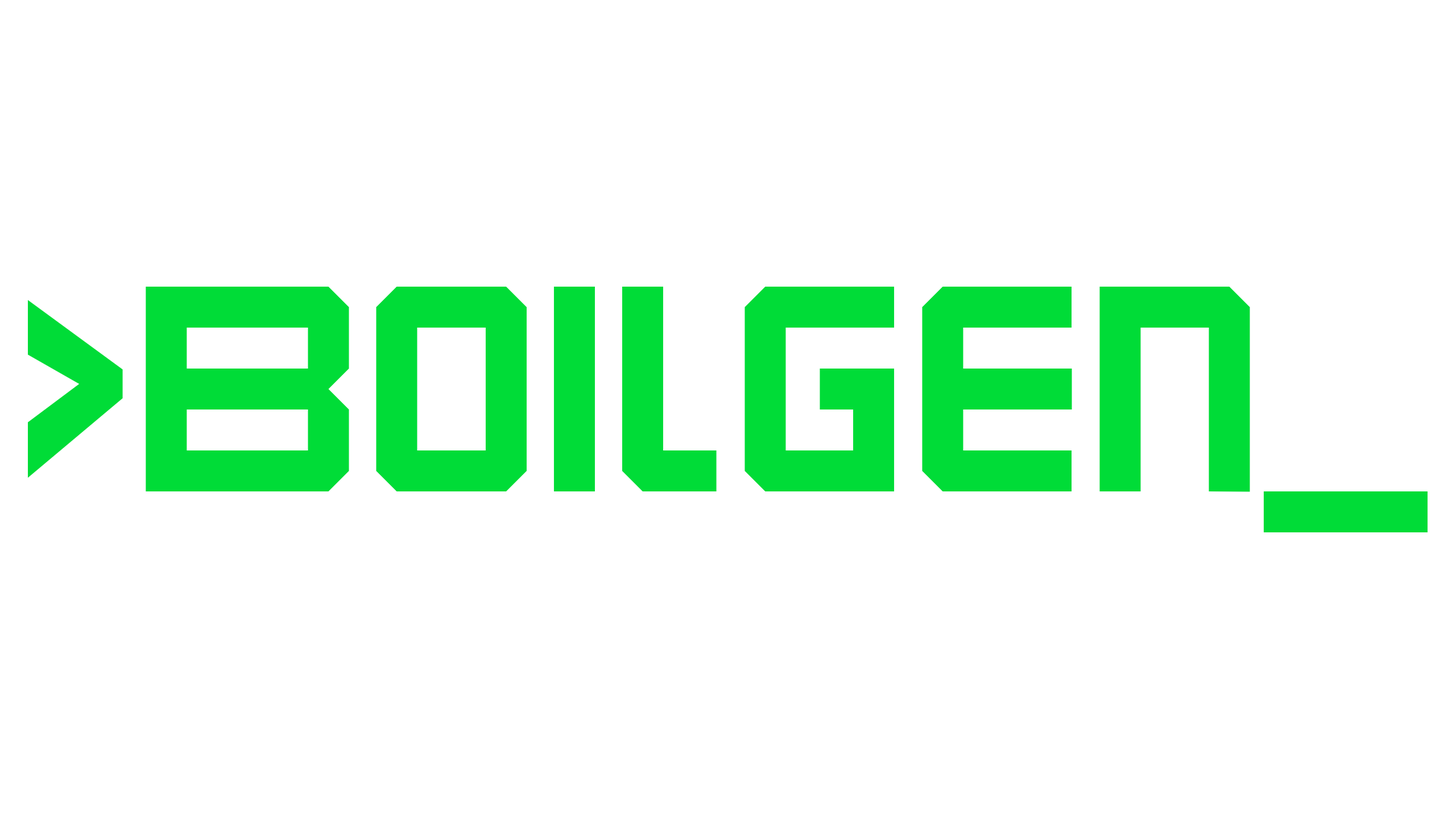
<style>
.page{position:relative;width:1456px;height:819px;background:#ffffff}
.page>*{position:absolute;margin:0}
.t1{font:273px "Karnivore";color:#00dc37}
</style>
<div class="page">
<p class="t1" style="left:28px;top:287px;width:1400px;height:245px">&gt;Boilgen_</p>
</div>
